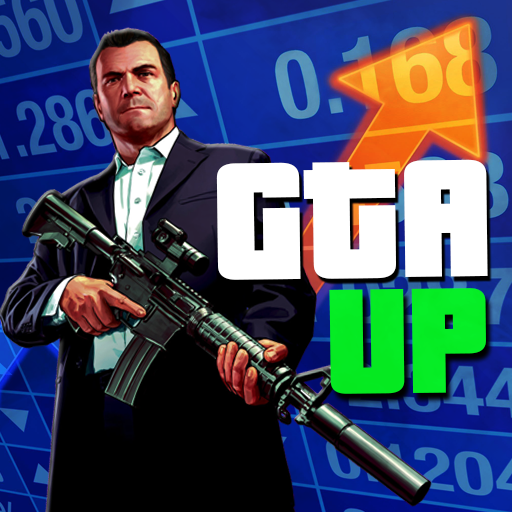
<style>
.page{position:relative;width:512px;height:512px}
.page>*{position:absolute;margin:0}
.t1{font:182px "PricedownBl-Regular";color:#ffffff;scale:0.97 1}
.t2{font:162.8px "PricedownBl-Regular";color:#07ef2d;scale:0.97 1}
</style>
<div class="page">
<p class="t1" style="left:216px;top:159px;width:272px;height:121px;rotate:-1deg">GTA</p>
<p class="t2" style="left:329px;top:288px;width:157px;height:106px;rotate:-1deg">UP</p>
</div>
